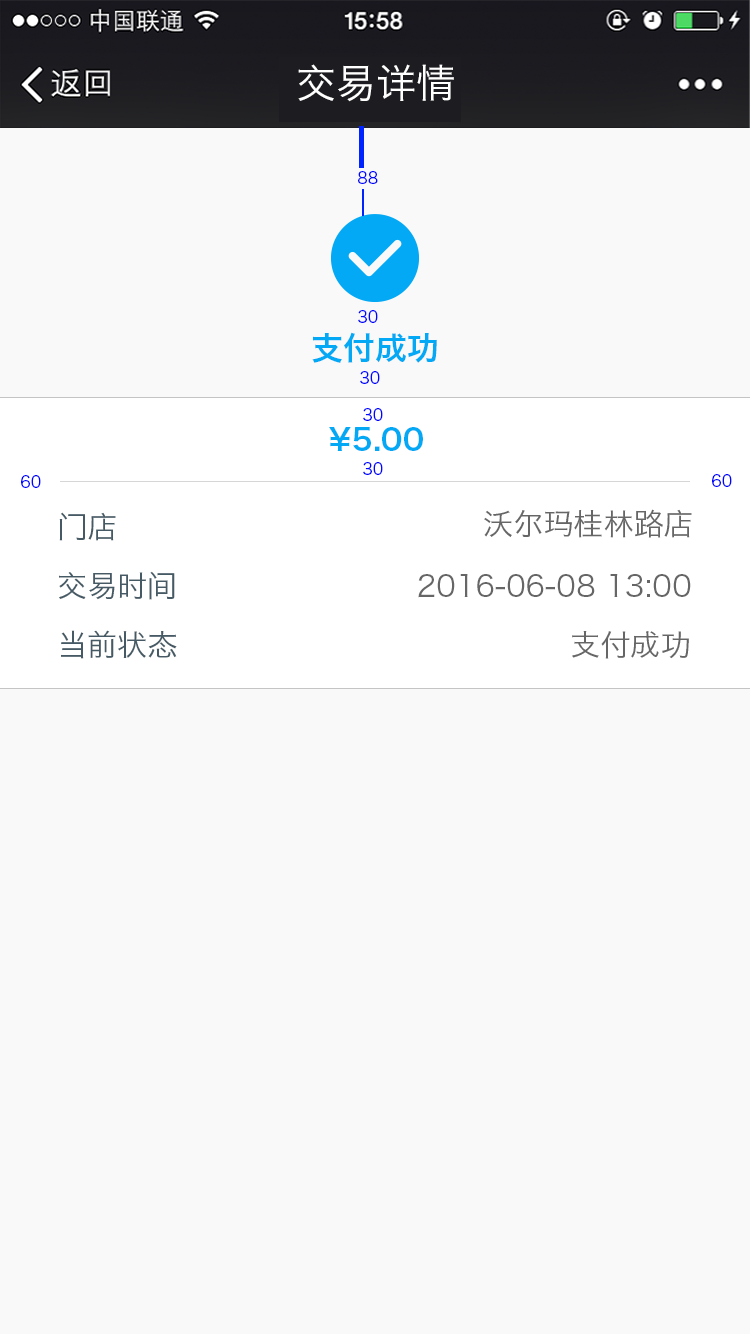
<style>
.page{position:relative;width:750px;height:1334px;background:#f9f9f9}
.page>*{position:absolute;margin:0}
.t1{font:40px "HiraginoSansGB-W3";color:#ffffff}
.t2{font:16px "HiraginoSansGB-W3";color:#0006ff}
.t3{font:32px "HiraginoSansGB-W6";color:#03a9f4}
.t4{font:30px "HiraginoSansGB-W6";color:#03a9f4}
.t5{font:30px "HiraginoSansGB-W3";color:#666666}
.t6{font:30px "HiraginoSansGB-W3";color:#455a64}
</style>
<div class="page">
<p class="t1" style="left:298px;top:64px;width:156px;height:38px">交易详情</p>
<p class="t2" style="left:358px;top:171px;width:20px;height:13px">88</p>
<p class="t2" style="left:358px;top:310px;width:20px;height:13px">30</p>
<p class="t3" style="left:312px;top:332px;width:125px;height:31px">支付成功</p>
<p class="t2" style="left:360px;top:371px;width:20px;height:13px">30</p>
<p class="t2" style="left:363px;top:408px;width:20px;height:13px">30</p>
<p class="t4" style="left:329px;top:427px;width:94px;height:24px">¥5.00</p>
<p class="t2" style="left:363px;top:462px;width:20px;height:13px">30</p>
<p class="t2" style="left:21px;top:475px;width:20px;height:13px">60</p>
<p class="t2" style="left:712px;top:474px;width:20px;height:13px">60</p>
<p class="t5" style="left:484px;top:509px;width:208px;height:29px">沃尔玛桂林路店</p>
<p class="t6" style="left:59px;top:512px;width:57px;height:29px">门店</p>
<p class="t6" style="left:59px;top:571px;width:116px;height:29px">交易时间</p>
<p class="t5" style="left:418px;top:574px;width:273px;height:24px">2016-06-08 13:00</p>
<p class="t6" style="left:61px;top:630px;width:116px;height:29px">当前状态</p>
<p class="t5" style="left:572px;top:631px;width:117px;height:28px">支付成功</p>
</div>
